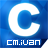
<style>
.page{position:relative;width:48px;height:48px;background:#ffffff}
.page>*{position:absolute;margin:0}
.t1{font:8.3px "BitDustTwo";color:#ffffff}
</style>
<div class="page">
<p class="t1" style="left:7px;top:40px;width:33px;height:5px">cm.ivan</p>
</div>
